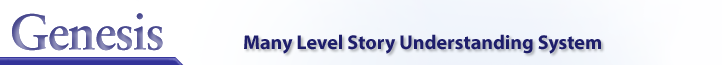
<style>
.page{position:relative;width:722px;height:65px}
.page>*{position:absolute;margin:0}
.t1{font:50px "Sabon-Bold";letter-spacing:-0.03em}
.t2{font:20px "MyriadPro-Bold";color:#1e1e6b}
</style>
<div class="page">
<p class="t1" style="left:12px;top:13px;width:151px;height:38px">Genesis</p>
<p class="t1" style="left:12px;top:13px;width:151px;height:38px">Genesis</p>
<p class="t2" style="left:244px;top:34px;width:357px;height:20px">Many Level Story Understanding System</p>
</div>
